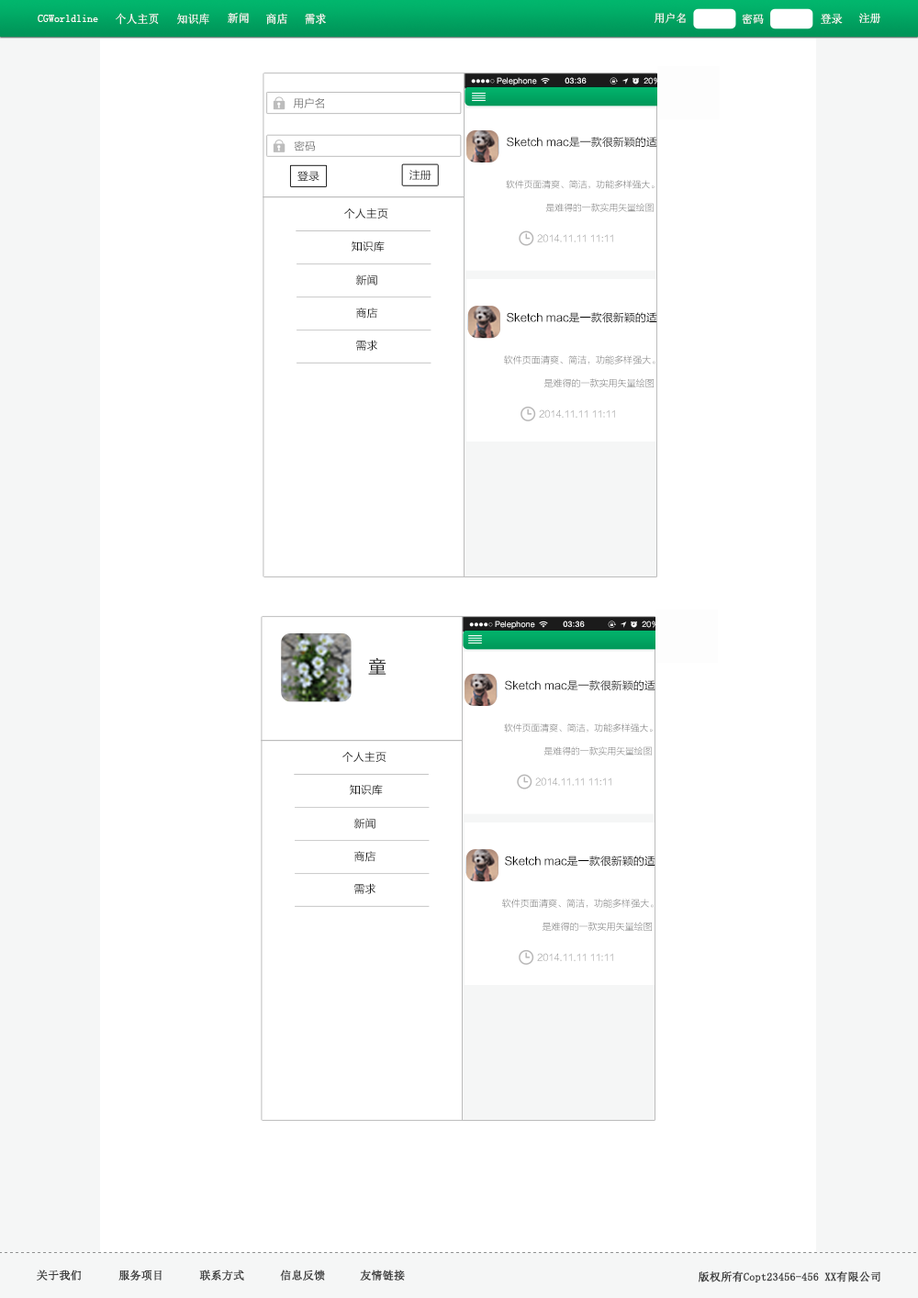
<style>
.page{position:relative;width:918px;height:1298px;background:#ffffff}
.page>*{position:absolute;margin:0}
.t1{font:11.4px "SimSun";color:#fdfcfc;scale:0.97 1}
.t2{font:11px "SimSun";color:#fdfcfc}
.t3{font:11px "SimSun";color:#ffffff}
.t4{font:8.1px "HelveticaNeue";letter-spacing:0.02em;color:#ffffff}
.t5{font:8.1px "HelveticaNeue-Medium";letter-spacing:0.03em;color:#ffffff}
.t6{font:8.1px "HelveticaNeue";letter-spacing:0.02em}
.t7{font:11px "FZLTHJW--GB1-0";color:#747474}
.t8{font:11px "FZLTHJW--GB1-0";color:#191919}
.t9{font:11px "FZLTHJW--GB1-0"}
.t10{font:9px "FZLTXHJW--GB1-0"}
.t11{font:9px "FZLTXHJW--GB1-0";color:#737373}
.t12{font:9.2px "FZLTXHJW--GB1-0";color:#898989}
.t13{font:11px "FZLTHJW--GB1-0";color:#040404}
.t14{font:9.2px "FZLTXHJW--GB1-0";color:#737373}
.t15{font:18.4px "FZLTHJW--GB1-0";color:#191919}
.t16{font:11px "SimSun";color:#3d3d3d;font-weight:bold}
</style>
<div class="page">
<p class="t1" style="left:38px;top:15px;width:60px;height:7px">CGWorldline</p>
<p class="t1" style="left:116px;top:13px;width:43px;height:12px">个人主页</p>
<p class="t1" style="left:177px;top:13px;width:32px;height:12px">知识库</p>
<p class="t1" style="left:228px;top:12px;width:21px;height:12px">新闻</p>
<p class="t1" style="left:266px;top:13px;width:21px;height:12px">商店</p>
<p class="t1" style="left:305px;top:13px;width:21px;height:12px">需求</p>
<p class="t2" style="left:655px;top:13px;width:31px;height:11px">用户名</p>
<p class="t2" style="left:742px;top:14px;width:22px;height:10px">密码</p>
<p class="t3" style="left:821px;top:14px;width:22px;height:10px">登录</p>
<p class="t3" style="left:860px;top:13px;width:21px;height:11px">注册</p>
<p class="t4" style="left:497px;top:77px;width:40px;height:8px">Pelephone</p>
<p class="t5" style="left:565px;top:77px;width:22px;height:7px">03 36</p>
<p class="t6" style="left:644px;top:77px;width:17px;height:7px">20%</p>
<p class="t7" style="left:293px;top:97px;width:31px;height:11px">用户名</p>
<p class="t8" style="left:507px;top:137px;width:151px;height:11px">Sketch mac是一款很新颖的适</p>
<p class="t7" style="left:294px;top:141px;width:21px;height:11px">密码</p>
<p class="t9" style="left:298px;top:171px;width:22px;height:10px">登录</p>
<p class="t9" style="left:410px;top:170px;width:22px;height:10px">注册</p>
<p class="t10" style="left:506px;top:180px;width:149px;height:9px">软件页面清爽、简洁，功能多样强大。</p>
<p class="t8" style="left:344px;top:208px;width:44px;height:11px">个人主页</p>
<p class="t11" style="left:545px;top:203px;width:109px;height:9px">是难得的一款实用矢量绘图</p>
<p class="t8" style="left:352px;top:241px;width:33px;height:11px">知识库</p>
<p class="t12" style="left:537px;top:234px;width:76px;height:8px">2014.11.11 11:11</p>
<p class="t9" style="left:355px;top:275px;width:22px;height:11px">新闻</p>
<p class="t8" style="left:356px;top:308px;width:22px;height:11px">商店</p>
<p class="t13" style="left:507px;top:312px;width:151px;height:11px">Sketch mac是一款很新颖的适</p>
<p class="t8" style="left:356px;top:340px;width:21px;height:11px">需求</p>
<p class="t14" style="left:504px;top:355px;width:152px;height:10px">软件页面清爽、简洁，功能多样强大。</p>
<p class="t14" style="left:544px;top:378px;width:110px;height:10px">是难得的一款实用矢量绘图</p>
<p class="t12" style="left:539px;top:410px;width:76px;height:8px">2014.11.11 11:11</p>
<p class="t4" style="left:495px;top:621px;width:40px;height:8px">Pelephone</p>
<p class="t5" style="left:563px;top:621px;width:22px;height:6px">03 36</p>
<p class="t6" style="left:642px;top:621px;width:17px;height:7px">20%</p>
<p class="t15" style="left:368px;top:658px;width:19px;height:17px">童</p>
<p class="t8" style="left:505px;top:680px;width:151px;height:11px">Sketch mac是一款很新颖的适</p>
<p class="t10" style="left:504px;top:724px;width:149px;height:9px">软件页面清爽、简洁，功能多样强大。</p>
<p class="t11" style="left:544px;top:747px;width:108px;height:9px">是难得的一款实用矢量绘图</p>
<p class="t8" style="left:343px;top:752px;width:44px;height:10px">个人主页</p>
<p class="t8" style="left:350px;top:784px;width:33px;height:11px">知识库</p>
<p class="t12" style="left:535px;top:778px;width:77px;height:8px">2014.11.11 11:11</p>
<p class="t9" style="left:354px;top:818px;width:22px;height:11px">新闻</p>
<p class="t8" style="left:354px;top:851px;width:23px;height:11px">商店</p>
<p class="t13" style="left:505px;top:856px;width:151px;height:11px">Sketch mac是一款很新颖的适</p>
<p class="t8" style="left:354px;top:883px;width:22px;height:11px">需求</p>
<p class="t14" style="left:502px;top:899px;width:152px;height:9px">软件页面清爽、简洁，功能多样强大。</p>
<p class="t14" style="left:542px;top:922px;width:110px;height:9px">是难得的一款实用矢量绘图</p>
<p class="t12" style="left:537px;top:953px;width:76px;height:8px">2014.11.11 11:11</p>
<p class="t16" style="left:37px;top:1270px;width:45px;height:11px">关于我们</p>
<p class="t16" style="left:118px;top:1270px;width:44px;height:11px">服务项目</p>
<p class="t16" style="left:199px;top:1270px;width:45px;height:11px">联系方式</p>
<p class="t16" style="left:280px;top:1270px;width:45px;height:11px">信息反馈</p>
<p class="t16" style="left:360px;top:1270px;width:45px;height:11px">友情链接</p>
<p class="t16" style="left:699px;top:1272px;width:182px;height:11px">版权所有Copt23456-456 XX有限公司</p>
</div>
